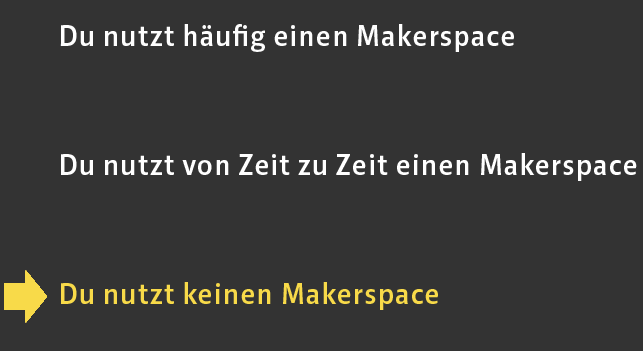
<style>
.page{position:relative;width:643px;height:351px;background:#333333}
.page>*{position:absolute;margin:0}
.t1{font:30px "Riga-Medium";letter-spacing:0.05em;color:#fefefe}
.t2{font:30px "Riga-Medium";letter-spacing:0.05em;color:#ffffff}
.t3{font:30px "Riga-Medium";letter-spacing:0.05em;color:#f8da49}
</style>
<div class="page">
<p class="t1" style="left:61px;top:24px;width:453px;height:28px">Du nutzt häufig einen Makerspace</p>
<p class="t2" style="left:61px;top:153px;width:576px;height:28px">Du nutzt von Zeit zu Zeit einen Makerspace</p>
<p class="t3" style="left:61px;top:282px;width:377px;height:28px">Du nutzt keinen Makerspace</p>
</div>
